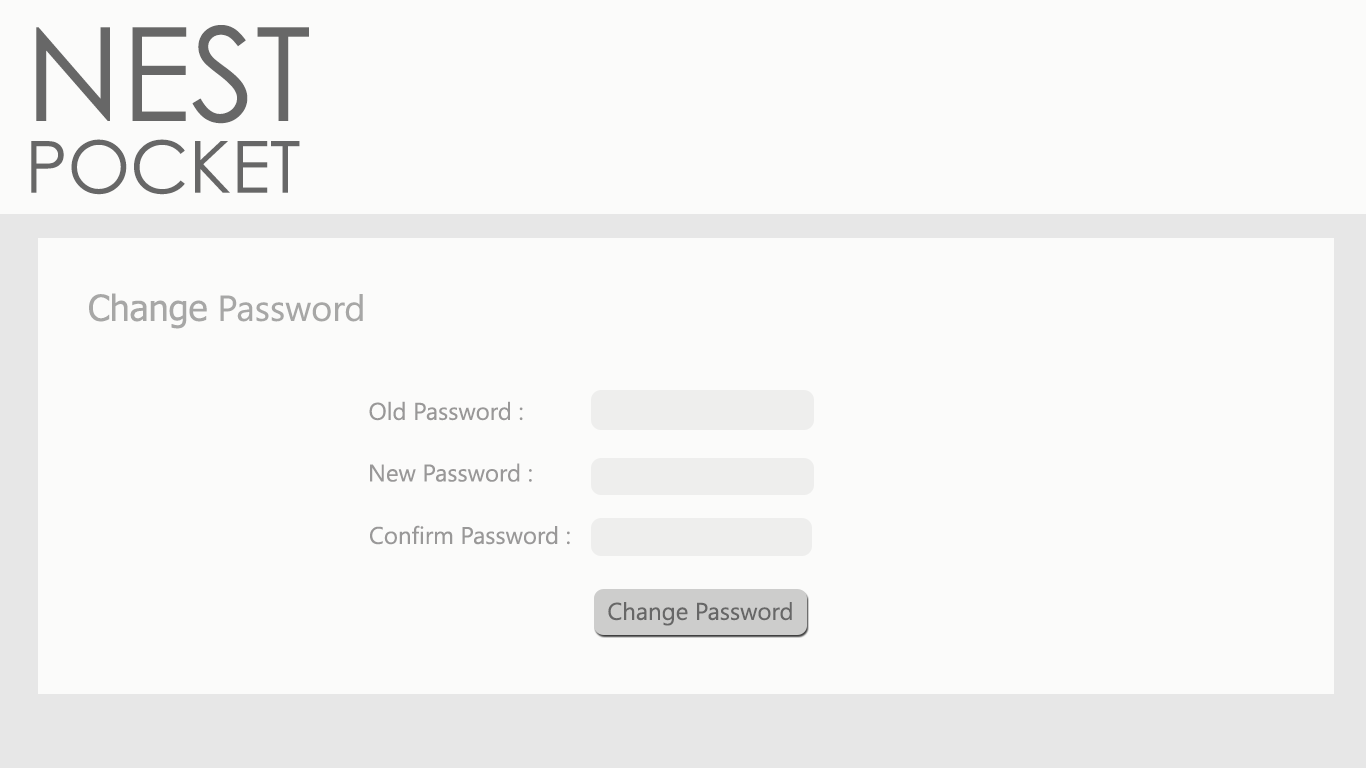
<style>
.page{position:relative;width:1366px;height:768px;background:#fbfbfa}
.page>*{position:absolute;margin:0}
.t1{font:130px "CenturyGothic";color:#676767}
.t2{font:90px "CenturyGothic";color:#676767}
.t3{font:72px "CenturyGothic";color:#676767}
.t4{font:36px "SegoeUI";color:#a7a7a6}
.t5{font:36px "Tahoma";color:#a7a7a6}
.t6{font:24px "SegoeUI";color:#999898}
.t7{font:24px "SegoeUI";color:#676767}
</style>
<div class="page">
<p class="t1" style="left:36px;top:25px;width:273px;height:99px"><span class="t2"><br></span>NEST</p>
<p class="t3" style="left:31px;top:139px;width:269px;height:56px">POCKET</p>
<p class="t4" style="left:89px;top:293px;width:274px;height:36px"><span class="t5">Change</span> Password</p>
<p class="t6" style="left:369px;top:401px;width:154px;height:20px">Old Password :</p>
<p class="t6" style="left:370px;top:463px;width:162px;height:19px">New Password :</p>
<p class="t6" style="left:370px;top:525px;width:200px;height:20px">Confirm Password :</p>
<p class="t7" style="left:608px;top:602px;width:184px;height:24px">Change Password</p>
</div>
